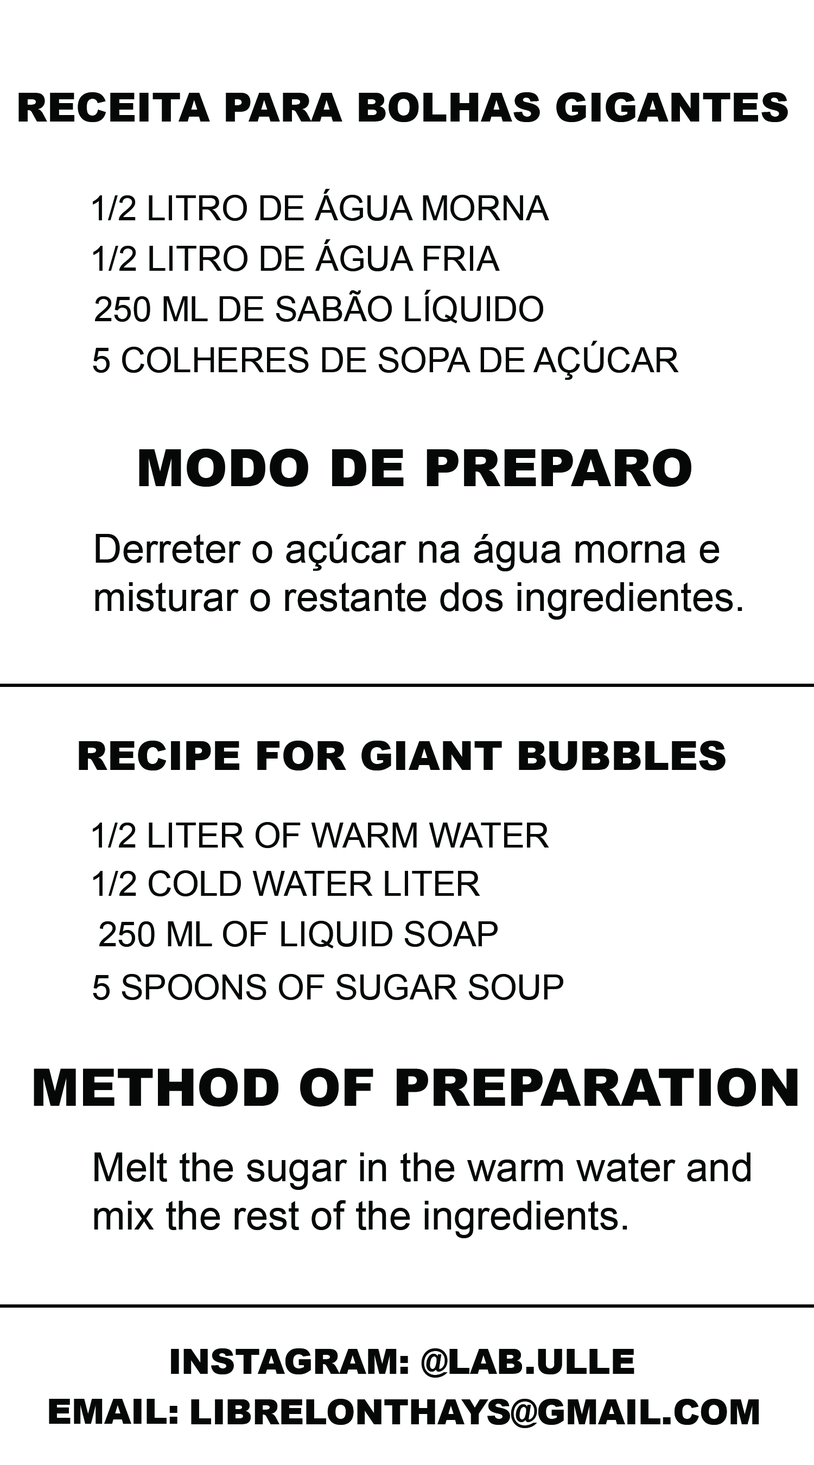
<style>
.page{position:relative;width:814px;height:1465px;background:#ffffff}
.page>*{position:absolute;margin:0}
.t1{font:40.2px "Arial-Black";color:#060808}
.t2{font:34.5px "ArialMT";color:#060808}
.t3{font:51.7px "Arial-Black";color:#060808}
.t4{font:40.2px "ArialMT";color:#060808}
.t5{font:34.5px "Arial-Black";color:#060808}
</style>
<div class="page">
<p class="t1" style="left:18px;top:92px;width:770px;height:30px">RECEITA PARA BOLHAS GIGANTES</p>
<p class="t2" style="left:93px;top:189px;width:456px;height:32px">1/2 LITRO DE ÁGUA MORNA</p>
<p class="t2" style="left:93px;top:239px;width:407px;height:32px">1/2 LITRO DE ÁGUA FRIA</p>
<p class="t2" style="left:95px;top:290px;width:448px;height:33px">250 ML DE SABÃO LÍQUIDO</p>
<p class="t2" style="left:93px;top:341px;width:586px;height:39px">5 COLHERES DE SOPA DE AÇÚCAR</p>
<p class="t3" style="left:139px;top:449px;width:552px;height:38px">MODO DE PREPARO</p>
<p class="t4" style="left:95px;top:534px;width:647px;height:86px">Derreter o açúcar na água morna e misturar o restante dos ingredientes.</p>
<p class="t1" style="left:79px;top:741px;width:646px;height:30px">RECIPE FOR GIANT BUBBLES</p>
<p class="t2" style="left:93px;top:822px;width:456px;height:26px">1/2 LITER OF WARM WATER</p>
<p class="t2" style="left:93px;top:870px;width:387px;height:26px">1/2 COLD WATER LITER</p>
<p class="t2" style="left:99px;top:921px;width:399px;height:27px">250 ML OF LIQUID SOAP</p>
<p class="t2" style="left:93px;top:974px;width:470px;height:26px">5 SPOONS OF SUGAR SOUP</p>
<p class="t3" style="left:34px;top:1068px;width:764px;height:39px">METHOD OF PREPARATION</p>
<p class="t4" style="left:94px;top:1153px;width:656px;height:85px">Melt the sugar in the warm water and mix the rest of the ingredients.</p>
<p class="t5" style="left:171px;top:1348px;width:463px;height:30px">INSTAGRAM: @LAB.ULLE</p>
<p class="t5" style="left:49px;top:1399px;width:128px;height:25px">EMAIL:</p>
<p class="t5" style="left:191px;top:1399px;width:568px;height:29px">LIBRELONTHAYS@GMAIL.COM</p>
</div>
